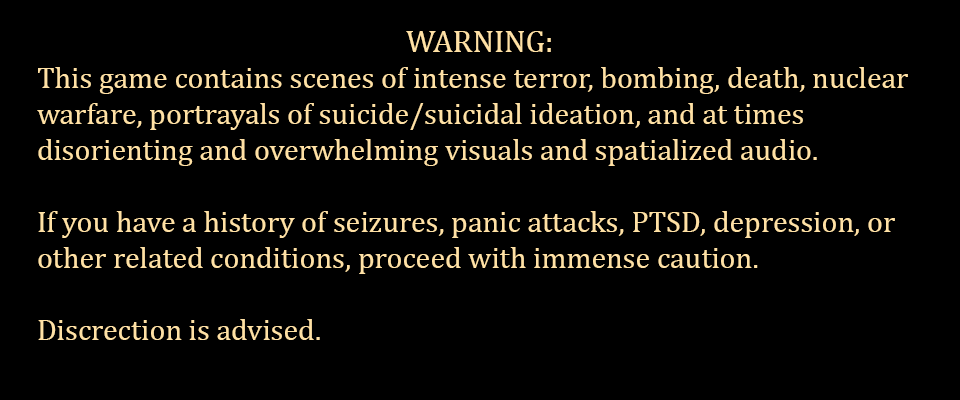
<style>
.page{position:relative;width:960px;height:400px;background:#000000}
.page>*{position:absolute;margin:0}
.t1{font:30px "Cambria";color:#ffe1a5}
.t2{font:31.7px "Cambria";color:#ffe1a5}
</style>
<div class="page">
<p class="t1" style="left:37px;top:31px;width:871px;height:309px;text-align:center"><span class="t2">WARNING:<br></span>This game contains scenes of intense terror, bombing, death, nuclear warfare, portrayals of suicide/suicidal ideation, and at times disorienting and overwhelming visuals and spatialized audio. <br><br>If you have a history of seizures, panic attacks, PTSD, depression, or other related conditions, proceed with immense caution. <br><br>Discrection is advised.</p>
</div>
